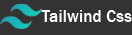
<style>
.page{position:relative;width:132px;height:35px;background:#333333}
.page>*{position:absolute;margin:0}
.t1{font:17.3px "FranklinGothic-Medium";color:#fefefe}
</style>
<div class="page">
<p class="t1" style="left:41px;top:10px;width:91px;height:12px">Tailwind Css</p>
</div>
